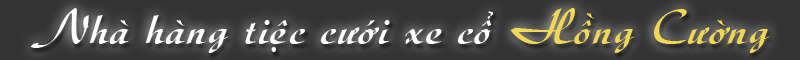
<style>
.page{position:relative;width:800px;height:60px;background:#333333}
.page>*{position:absolute;margin:0}
.t1{font:50.1px "UVNThuTu";letter-spacing:0.035em;color:#ffffff}
.t2{font:50.1px "UVNThuTu";letter-spacing:0.035em;color:#f0d754}
</style>
<div class="page">
<p class="t1" style="left:31px;top:8px;width:739px;height:45px">Nhà hàng tiệc cưới xe cổ <span class="t2">Hồng Cường</span></p>
</div>
